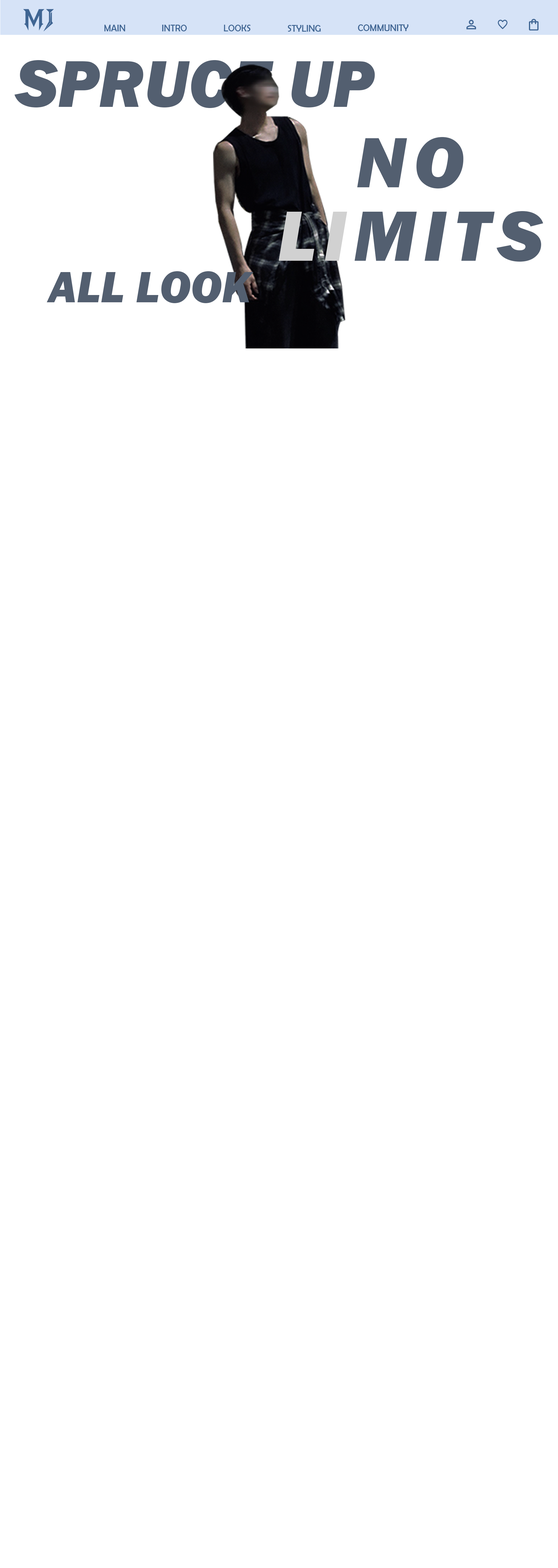
<style>
.page{position:relative;width:558px;height:1568px;background:#ffffff}
.page>*{position:absolute;margin:0}
.t1{font:9.7px "BerlinSansFB-Reg";color:#3f6593;scale:0.93 1}
.t2{font:68.6px "FranklinGothic-HeavyItalic";color:#535f70}
.t3{font:73.5px/73.5px "FranklinGothic-HeavyItalic";letter-spacing:0.1em;color:#535f70}
.t4{font:73.5px/73.5px "FranklinGothic-HeavyItalic";letter-spacing:0.1em;color:#d1d1d1}
.t5{font:45.3px "FranklinGothic-HeavyItalic";color:#535f70}
</style>
<div class="page">
<p class="t1" style="left:104px;top:25px;width:21px;height:6px">MAIN</p>
<p class="t1" style="left:162px;top:25px;width:25px;height:6px">INTRO</p>
<p class="t1" style="left:224px;top:25px;width:27px;height:6px">LOOKS</p>
<p class="t1" style="left:287px;top:25px;width:34px;height:7px">STYLING</p>
<p class="t1" style="left:357px;top:24px;width:51px;height:7px">COMMUNITY</p>
<p class="t2" style="left:14px;top:60px;width:361px;height:48px">SPRUCE UP</p>
<p class="t3" style="left:278px;top:137px;width:265px;height:125px;text-align:center">NO<br><span class="t4">LI</span>MITS</p>
<p class="t5" style="left:46px;top:271px;width:207px;height:32px">ALL LOOK</p>
</div>
